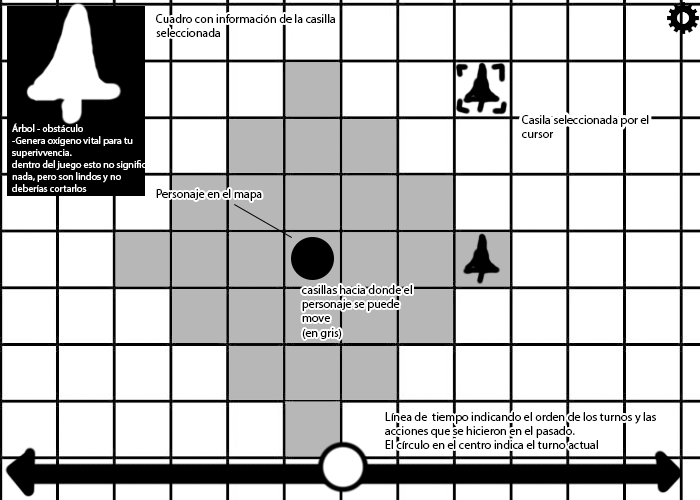
<style>
.page{position:relative;width:700px;height:500px;background:#ffffff}
.page>*{position:absolute;margin:0}
.t1{font:12px "MyriadPro-Regular";color:#000000}
.t2{font:10px "MyriadPro-Regular";color:#ffffff}
</style>
<div class="page">
<p class="t1" style="left:156px;top:14px;width:180px;height:23px">Cuadro con información de la casilla  seleccionada</p>
<p class="t2" style="left:12px;top:123px;width:139px;height:69px">Árbol - obstáculo<br>-Genera oxígeno vital para tu superivvencia.<br>dentro del juego esto no significa nada, pero son lindos y no deberías cortarlos</p>
<p class="t1" style="left:522px;top:115px;width:127px;height:23px">Casila seleccionada por el cursor</p>
<p class="t1" style="left:156px;top:189px;width:106px;height:12px">Personaje en el mapa</p>
<p class="t1" style="left:302px;top:285px;width:110px;height:54px">casillas hacia donde el personaje se puede move<br>(en gris)</p>
<p class="t1" style="left:385px;top:412px;width:271px;height:37px">Línea de  tiempo indicando el orden de los turnos y las acciones que se hicieron en el pasado.<br>El círculo en el centro indica el turno actual</p>
</div>
